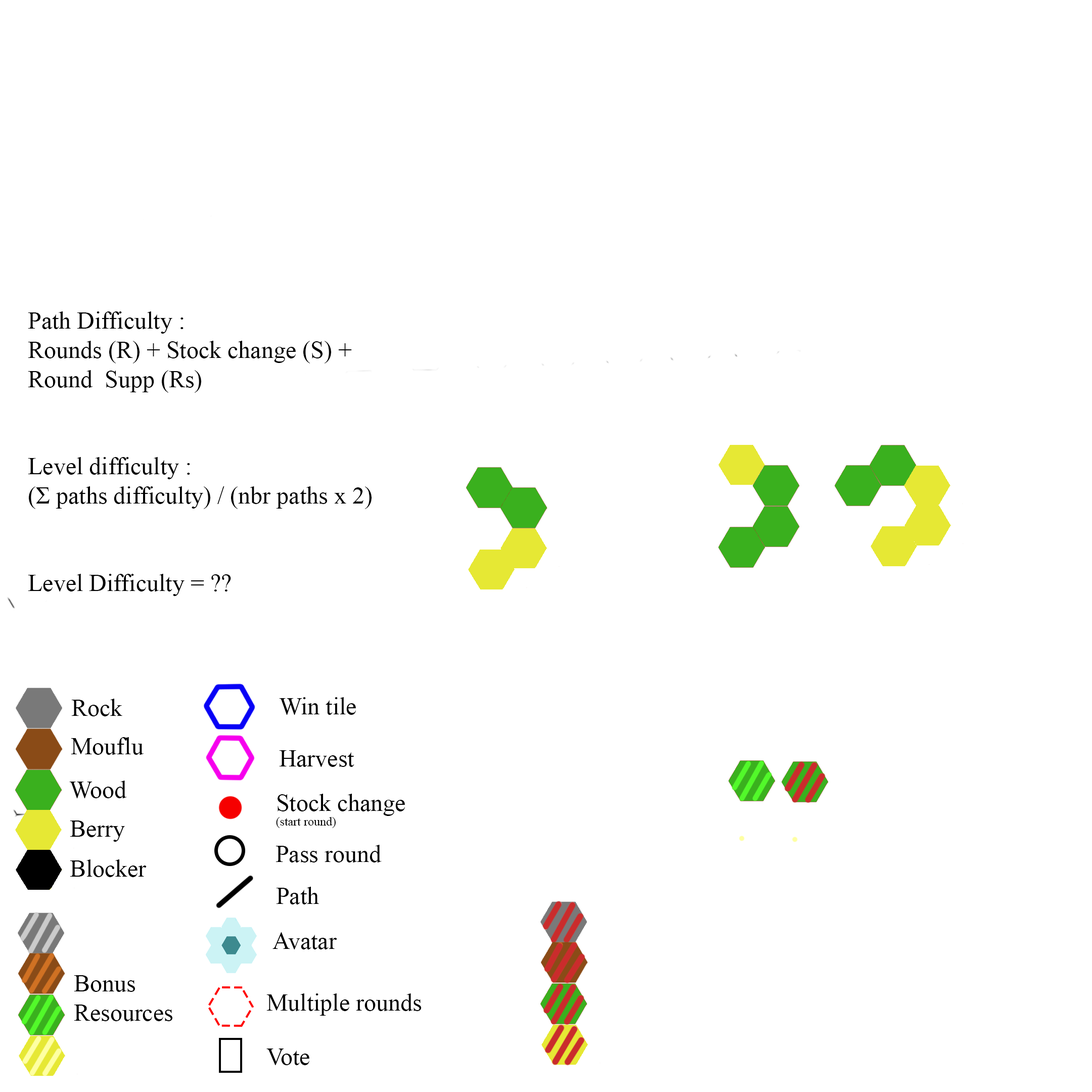
<style>
.page{position:relative;width:1092px;height:1092px;background:#ffffff}
.page>*{position:absolute;margin:0}
.t1{font:24.3px "TimesNewRomanPSMT";color:#000000}
.t2{font:12.1px "TimesNewRomanPSMT";color:#000000}
</style>
<div class="page">
<p class="t1" style="left:28px;top:311px;width:344px;height:285px">Path Difficulty : <br>Rounds (R) + Stock change (S) + Round  Supp (Rs)<br><br><br>Level difficulty :<br>(Σ paths difficulty) / (nbr paths x 2)<br><br><br>Level Difficulty = ??</p>
<p class="t1" style="left:71px;top:699px;width:51px;height:17px">Rock</p>
<p class="t1" style="left:279px;top:697px;width:77px;height:18px">Win tile</p>
<p class="t1" style="left:71px;top:737px;width:73px;height:18px">Mouflu</p>
<p class="t1" style="left:279px;top:750px;width:75px;height:17px">Harvest</p>
<p class="t1" style="left:69px;top:781px;width:58px;height:17px">Wood</p>
<p class="t2" style="left:276px;top:794px;width:129px;height:34px"><span class="t1">Stock change<br></span>(start round)</p>
<p class="t1" style="left:70px;top:821px;width:55px;height:21px">Berry</p>
<p class="t1" style="left:276px;top:845px;width:106px;height:17px">Pass round</p>
<p class="t1" style="left:70px;top:859px;width:77px;height:18px">Blocker</p>
<p class="t1" style="left:276px;top:887px;width:43px;height:17px">Path</p>
<p class="t1" style="left:272px;top:932px;width:65px;height:17px">Avatar</p>
<p class="t1" style="left:74px;top:975px;width:98px;height:46px">Bonus<br>Resources</p>
<p class="t1" style="left:266px;top:993px;width:155px;height:23px">Multiple rounds</p>
<p class="t1" style="left:266px;top:1049px;width:43px;height:16px">Vote</p>
</div>
